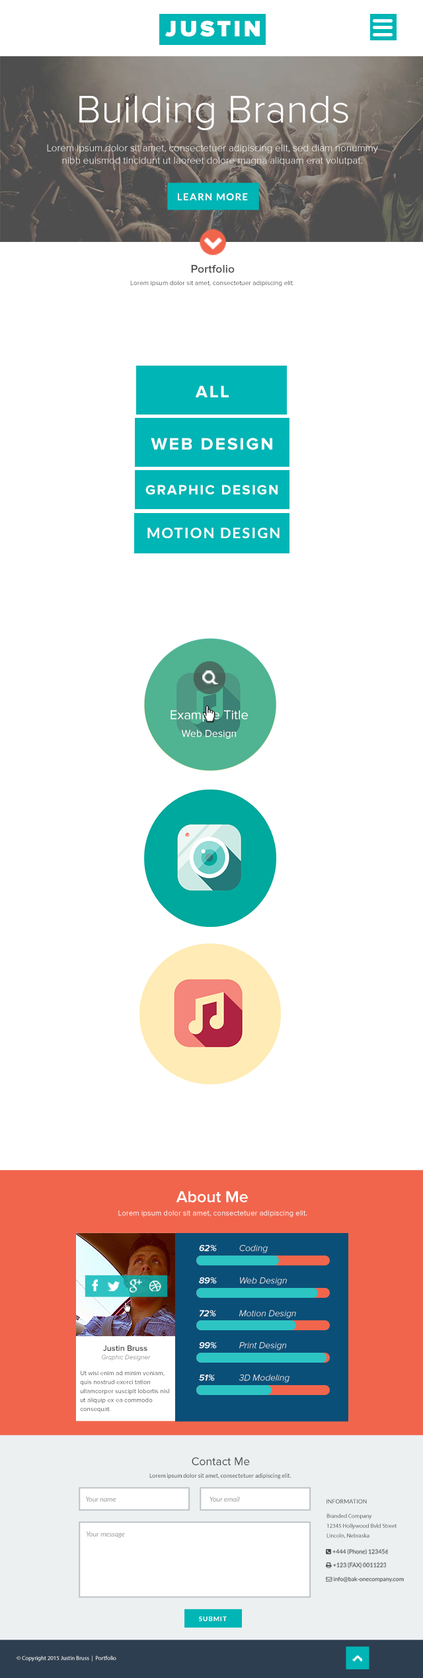
<style>
.page{position:relative;width:423px;height:1678px;background:#ffffff}
.page>*{position:absolute;margin:0}
.t1{font:23.1px "ProximaNova-Black";letter-spacing:0.12em;color:#ffffff}
.t2{font:39.9px "ProximaNova-Light";color:#ffffff}
.t3{font:9.9px/12.5px "ProximaNova-Light";color:#ffffff}
.t4{font:9.5px "Lato-Bold";letter-spacing:0.1em;color:#ffffff}
.t5{font:11.5px "ProximaNova-Semibold";color:#444444}
.t6{font:6.6px "ProximaNova-Regular"}
.t7{font:17.2px "ProximaNova-Bold";letter-spacing:0.1em;color:#ffffff}
.t8{font:13.7px "ProximaNova-Bold";letter-spacing:0.1em;color:#ffffff}
.t9{font:14.2px "Lato-Bold";letter-spacing:0.1em;color:#ffffff}
.t10{font:13.2px "ProximaNova-Regular";color:#ffffff}
.t11{font:10.3px "ProximaNova-Regular";color:#ffffff}
.t12{font:16.3px "ProximaNova-Semibold";color:#ffffff}
.t13{font:7.6px "ProximaNova-Regular";color:#ffffff}
.t14{font:9px "ProximaNova-SemiboldIt";color:#ffffff}
.t15{font:9px "ProximaNova-LightIt";color:#ffffff}
.t16{font:8.1px "ProximaNova-Semibold";color:#444444}
.t17{font:9px "ProximaNova-LightIt"}
.t18{font:6.3px "ProximaNova-LightIt"}
.t19{font:6.3px/9px "ProximaNova-Regular"}
.t20{font:11.6px "ProximaNova-Regular";color:#444444}
.t21{font:5.8px "Lato-Regular";color:#444444}
.t22{font:7px "Lato-Italic";color:#999999}
.t23{font:5.7px "Lato-Regular";color:#444444}
.t24{font:5.7px/9.9px "MyriadPro-Regular"}
.t25{font:6.5px "Lato-Bold";letter-spacing:0.1em;color:#ffffff}
.t26{font:5.7px "MyriadPro-Regular";color:#ffffff}
</style>
<div class="page">
<p class="t1" style="left:165px;top:20px;width:95px;height:17px">JUSTIN</p>
<p class="t2" style="left:79px;top:96px;width:269px;height:34px">Building Brands</p>
<p class="t3" style="left:47px;top:144px;width:331px;height:22px;text-align:center">Lorem ipsum dolor sit amet, consectetuer adipiscing elit, sed diam nonummy<br>nibh euismod tincidunt ut laoreet dolore magna aliquam erat volutpat.</p>
<p class="t4" style="left:178px;top:193px;width:70px;height:7px">LEARN MORE</p>
<p class="t5" style="left:191px;top:264px;width:44px;height:9px">Portfolio</p>
<p class="t6" style="left:130px;top:280px;width:164px;height:6px">Lorem ipsum dolor sit amet, consectetuer adipiscing elit.</p>
<p class="t7" style="left:195px;top:385px;width:34px;height:12px">ALL</p>
<p class="t7" style="left:151px;top:438px;width:121px;height:12px">WEB DESIGN</p>
<p class="t8" style="left:145px;top:485px;width:133px;height:10px">GRAPHIC DESIGN</p>
<p class="t9" style="left:147px;top:528px;width:133px;height:10px">MOTION DESIGN</p>
<p class="t10" style="left:171px;top:710px;width:77px;height:12px">Example Title</p>
<p class="t11" style="left:181px;top:730px;width:55px;height:9px">Web Design</p>
<p class="t12" style="left:176px;top:1191px;width:72px;height:12px">About Me</p>
<p class="t13" style="left:118px;top:1210px;width:189px;height:7px">Lorem ipsum dolor sit amet, consectetuer adipiscing elit.</p>
<p class="t14" style="left:199px;top:1245px;width:18px;height:7px">62%</p>
<p class="t15" style="left:239px;top:1245px;width:29px;height:8px">Coding</p>
<p class="t14" style="left:199px;top:1277px;width:18px;height:7px">89%</p>
<p class="t15" style="left:240px;top:1277px;width:47px;height:8px">Web Design</p>
<p class="t14" style="left:199px;top:1310px;width:17px;height:6px">72%</p>
<p class="t15" style="left:239px;top:1310px;width:57px;height:8px">Motion Design</p>
<p class="t16" style="left:103px;top:1346px;width:44px;height:6px">Justin Bruss</p>
<p class="t14" style="left:199px;top:1342px;width:18px;height:7px">99%</p>
<p class="t17" style="left:239px;top:1342px;width:47px;height:8px">Print Design</p>
<p class="t18" style="left:102px;top:1355px;width:49px;height:6px">Graphic Designer</p>
<p class="t19" style="left:80px;top:1371px;width:89px;height:41px">Ut wisi enim ad minim veniam,<br>quis nostrud exerci tation<br>ullamcorper suscipit lobortis nisl<br>ut aliquip ex ea commodo<br>consequat.</p>
<p class="t14" style="left:199px;top:1375px;width:16px;height:6px">51%</p>
<p class="t15" style="left:239px;top:1375px;width:51px;height:8px">3D Modeling</p>
<p class="t20" style="left:192px;top:1457px;width:58px;height:9px">Contact Me</p>
<p class="t21" style="left:149px;top:1473px;width:143px;height:6px">Lorem ipsum dolor sit amet, consectetuer adipiscing elit.</p>
<p class="t22" style="left:86px;top:1496px;width:30px;height:6px">Your name</p>
<p class="t22" style="left:210px;top:1496px;width:30px;height:6px">Your email</p>
<p class="t23" style="left:327px;top:1499px;width:40px;height:5px">INFORMATION</p>
<p class="t24" style="left:327px;top:1513px;width:70px;height:26px">Branded Company<br>12345 Hollywood Bvld Street<br>Lincoln, Nebraska</p>
<p class="t22" style="left:86px;top:1531px;width:39px;height:7px">Your message</p>
<p class="t25" style="left:199px;top:1617px;width:28px;height:4px">SUBMIT</p>
<p class="t26" style="left:17px;top:1656px;width:99px;height:6px">© Copyright 2015 Justin Bruss  |  Portfolio</p>
</div>
